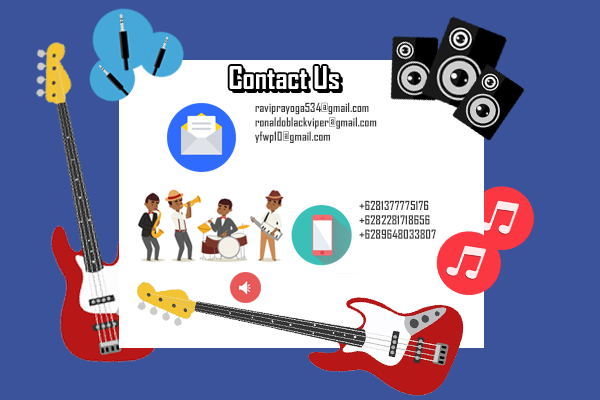
<style>
.page{position:relative;width:600px;height:400px;background:#3a539b}
.page>*{position:absolute;margin:0}
.t1{font:30px "AgencyFB-Bold";color:#ffffff}
.t2{font:12px "AgencyFB-Bold";color:#3a3a3a}
</style>
<div class="page">
<p class="t1" style="left:229px;top:66px;width:110px;height:23px">Contact Us</p>
<p class="t2" style="left:255px;top:102px;width:122px;height:41px">raviprayoga534@gmail.com<br>ronaldoblackviper@gmail.com<br>yfwp10@gmail.com</p>
<p class="t2" style="left:359px;top:200px;width:77px;height:39px">+6281377775176<br>+6282281718656<br>+6289648033807</p>
</div>
